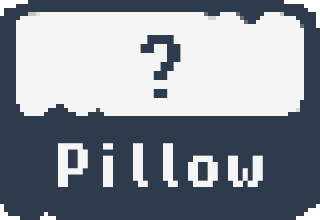
<style>
.page{position:relative;width:320px;height:220px;background:#2d3b4d}
.page>*{position:absolute;margin:0}
.t1{font:50.1px "PixelOperator8-Bold";color:#f5f5f5;scale:0.8 1}
</style>
<div class="page">
<p class="t1" style="left:58px;top:143px;width:205px;height:44px">Pillow</p>
</div>
